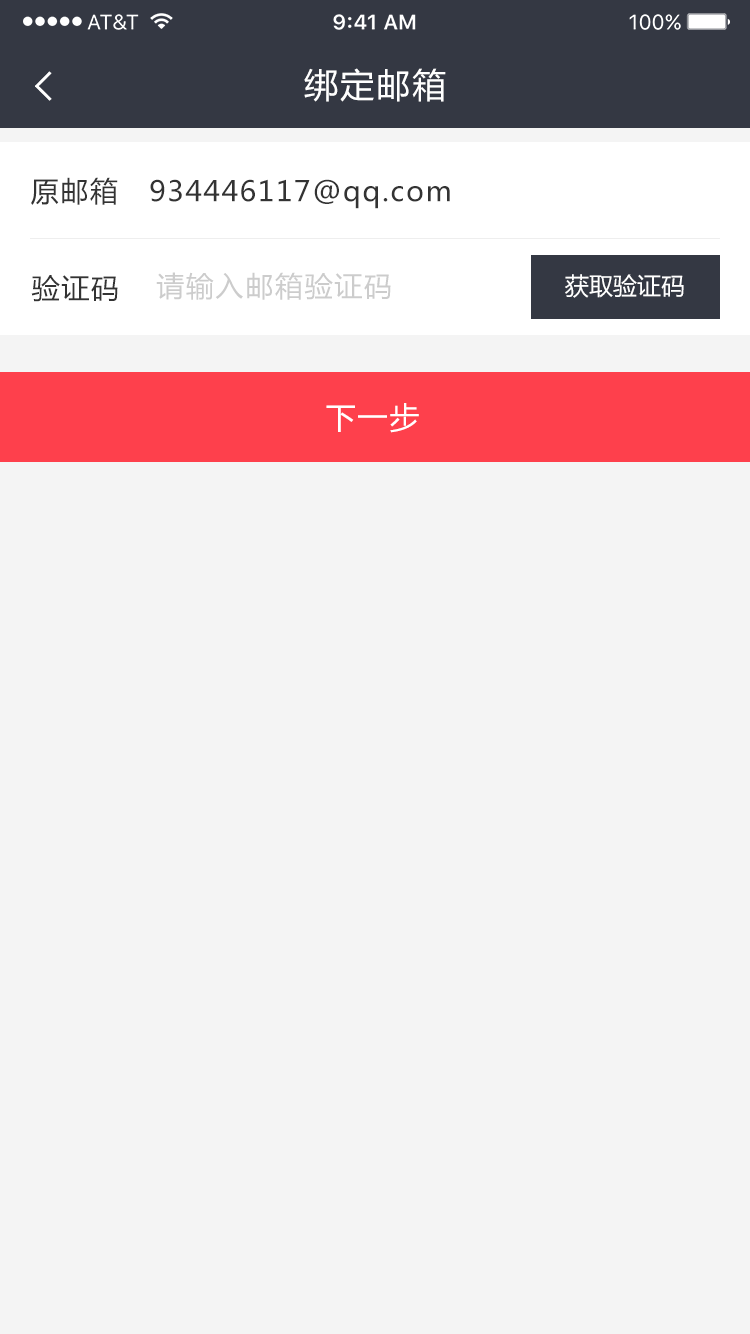
<style>
.page{position:relative;width:750px;height:1334px;background:#f4f4f4}
.page>*{position:absolute;margin:0}
.t1{font:34px "MicrosoftYaHei";letter-spacing:0.06em;color:#ffffff}
.t2{font:28px "MicrosoftYaHei";letter-spacing:0.06em;color:#333333}
.t3{font:28px "MicrosoftYaHei";letter-spacing:0.06em;color:#cccccc}
.t4{font:24px "MicrosoftYaHei";color:#ffffff}
.t5{font:30px "MicrosoftYaHei";letter-spacing:0.06em;color:#ffffff}
</style>
<div class="page">
<p class="t1" style="left:304px;top:68px;width:142px;height:34px">绑定邮箱</p>
<p class="t2" style="left:31px;top:177px;width:87px;height:28px">原邮箱</p>
<p class="t2" style="left:150px;top:179px;width:300px;height:30px">934446117@qq.com</p>
<p class="t2" style="left:31px;top:275px;width:87px;height:27px">验证码</p>
<p class="t3" style="left:156px;top:272px;width:235px;height:28px">请输入邮箱验证码</p>
<p class="t4" style="left:565px;top:274px;width:119px;height:24px">获取验证码</p>
<p class="t5" style="left:326px;top:403px;width:93px;height:30px">下一步</p>
</div>
